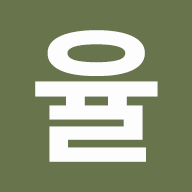
<style>
.page{position:relative;width:192px;height:192px;background:#68744c}
.page>*{position:absolute;margin:0}
.t1{font:150px "Pretendard-Bold";color:#fdfdfd}
</style>
<div class="page">
<p class="t1" style="left:35px;top:30px;width:123px;height:132px">율</p>
</div>
